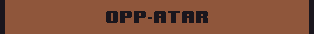
<style>
.page{position:relative;width:314px;height:34px;background:#8f563b}
.page>*{position:absolute;margin:0}
.t1{font:14px "8BITWONDERNominal";color:#1a161d}
</style>
<div class="page">
<p class="t1" style="left:106px;top:11px;width:102px;height:12px">OPP atar</p>
</div>
